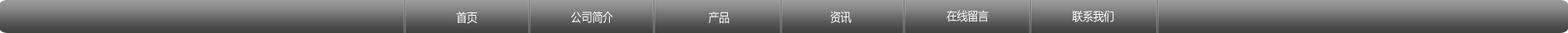
<style>
.page{position:relative;width:1568px;height:33px}
.page>*{position:absolute;margin:0}
.t1{font:12px "MicrosoftYaHei";color:#ffffff;scale:0.88 1}
</style>
<div class="page">
<p class="t1" style="left:456px;top:12px;width:21px;height:12px">首页</p>
<p class="t1" style="left:571px;top:11px;width:42px;height:12px">公司简介</p>
<p class="t1" style="left:708px;top:12px;width:22px;height:12px">产品</p>
<p class="t1" style="left:830px;top:11px;width:22px;height:12px">资讯</p>
<p class="t1" style="left:947px;top:10px;width:42px;height:12px">在线留言</p>
<p class="t1" style="left:1072px;top:10px;width:42px;height:12px">联系我们</p>
</div>
